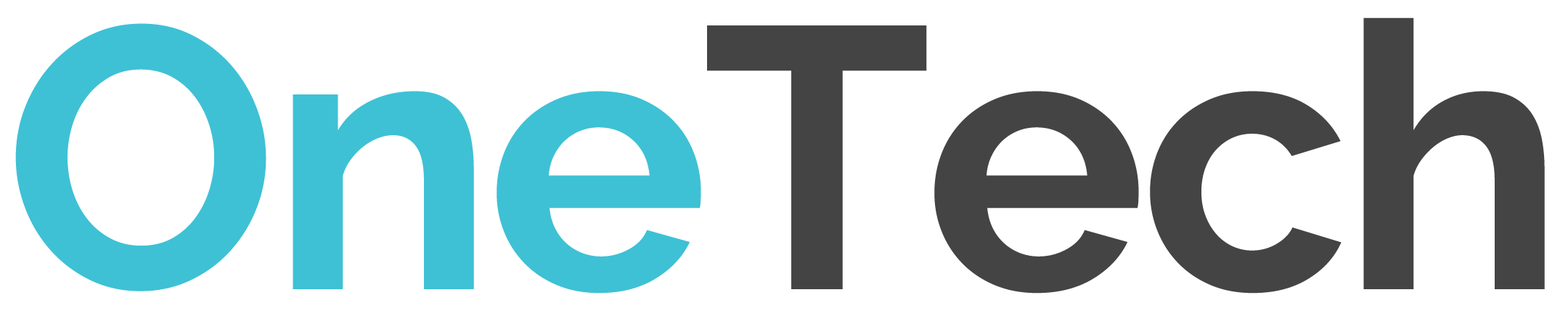
<style>
.page{position:relative;width:1568px;height:311px;background:#ffffff}
.page>*{position:absolute;margin:0}
.t1{font:370.9px "Raleway-Bold";letter-spacing:-0.02em;color:#444444}
.t2{font:370.9px "Raleway-Bold";letter-spacing:-0.02em;color:#3ec1d5}
</style>
<div class="page">
<p class="t1" style="left:15px;top:17px;width:1530px;height:276px"><span class="t2">One</span>Tech</p>
</div>
